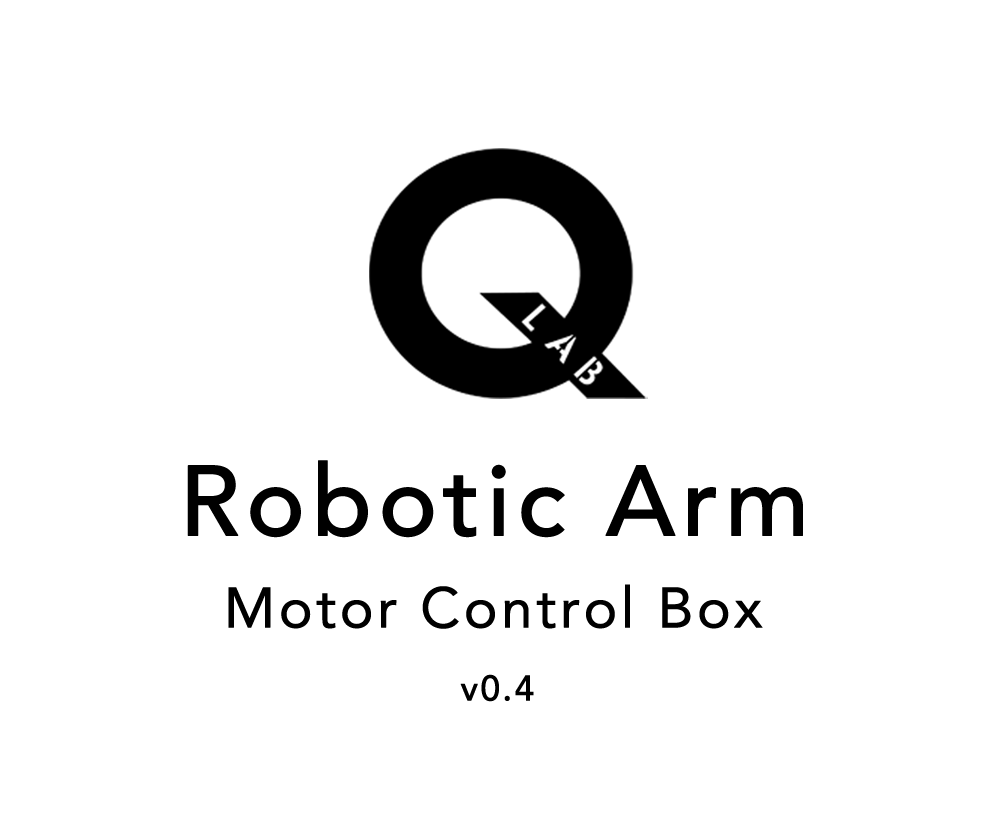
<style>
.page{position:relative;width:1000px;height:840px;background:#ffffff}
.page>*{position:absolute;margin:0}
.t1{font:98.8px "AvenirLTStd-Medium";letter-spacing:0.04em;color:#000000;font-weight:bold}
.t2{font:56.4px "AvenirLTStd-Roman";letter-spacing:0.04em;color:#000000;font-weight:bold}
.t3{font:35.3px "AvenirLTStd-Medium";letter-spacing:0.04em;color:#000000;font-weight:bold}
</style>
<div class="page">
<p class="t1" style="left:187px;top:460px;width:616px;height:78px">Robotic Arm</p>
<p class="t2" style="left:228px;top:584px;width:535px;height:45px">Motor Control Box</p>
<p class="t3" style="left:460px;top:674px;width:74px;height:28px">v0.4</p>
</div>
